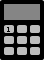
<style>
.page{position:relative;width:44px;height:60px;background:#000000}
.page>*{position:absolute;margin:0}
.t1{font:8px "AmericanTypewriter";color:#000000}
</style>
<div class="page">
<p class="t1" style="left:7px;top:27px;width:3px;height:5px">1</p>
</div>
